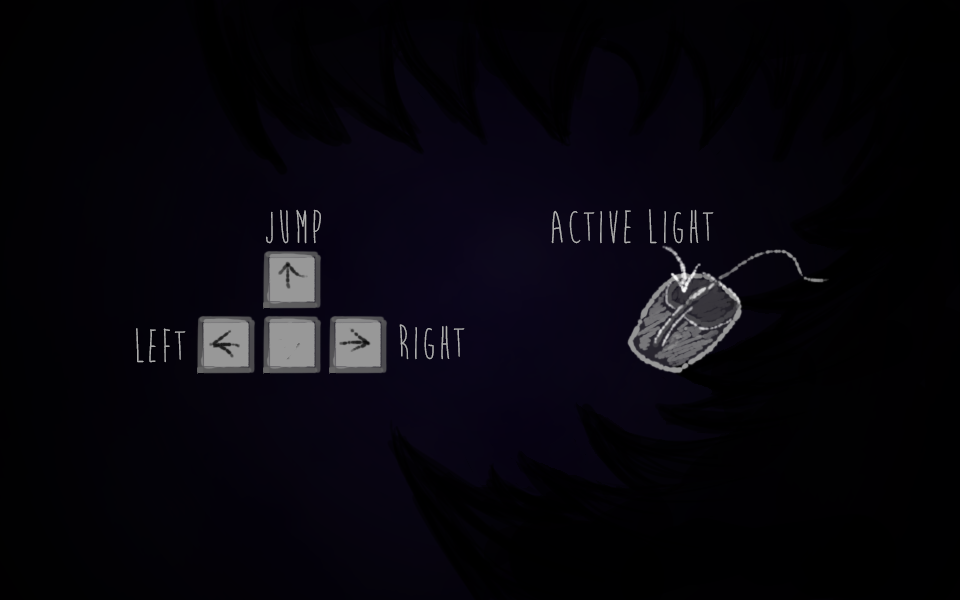
<style>
.page{position:relative;width:960px;height:600px}
.page>*{position:absolute;margin:0}
.t1{font:48px "BrainFlower";color:#b0b0b0;text-transform:uppercase}
</style>
<div class="page">
<p class="t1" style="left:266px;top:209px;width:55px;height:35px">Jump</p>
<p class="t1" style="left:551px;top:209px;width:163px;height:35px">Active light</p>
<p class="t1" style="left:136px;top:328px;width:50px;height:35px">LEFT</p>
<p class="t1" style="left:399px;top:324px;width:66px;height:36px">Right</p>
</div>
